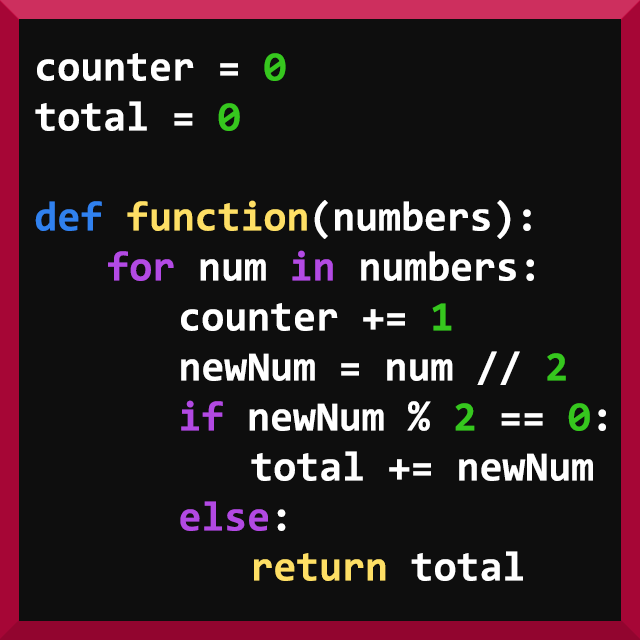
<style>
.page{position:relative;width:640px;height:640px;background:#0e0e0e}
.page>*{position:absolute;margin:0}
.t1{font:41.7px "Consolas-Bold";color:#ffffff}
.t2{font:41.7px "Consolas-Bold";color:#36c71e}
.t3{font:41.7px "Consolas-Bold";color:#3081ef}
.t4{font:41.7px "Consolas-Bold";color:#fedf65}
.t5{font:41.7px "Consolas-Bold";color:#b34ae4}
.t6{font:41.7px "Consolas-Bold";color:#b249e3}
</style>
<div class="page">
<p class="t1" style="left:35px;top:53px;width:571px;height:528px">counter = <span class="t2">0<br></span>total = <span class="t2">0<br><br></span><span class="t3">def </span><span class="t4">function</span>(numbers):<br>  <span class="t5">for </span>num <span class="t5">in </span>numbers:<br>    counter += <span class="t2">1<br></span>    newNum = num // <span class="t2">2<br>    </span><span class="t6">if </span>newNum % <span class="t2">2 </span>== <span class="t2">0</span>:<br>      total += newNum<br>    <span class="t6">else</span>:<br>      <span class="t4">return</span> total</p>
</div>
